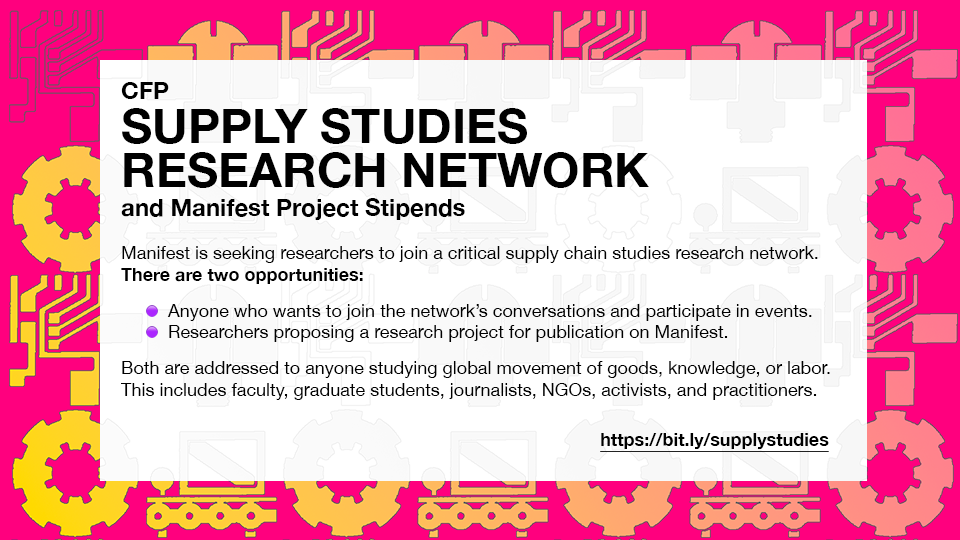
<style>
.page{position:relative;width:960px;height:540px;background:#ffffff}
.page>*{position:absolute;margin:0}
.t1{font:48px/44px "HelveticaNeue-Bold";color:#000000}
.t2{font:24px/44px "HelveticaNeue-Bold";color:#000000}
.t3{font:24px "HelveticaNeue-Bold";color:#000000}
.t4{font:18px "HelveticaNeue";color:#000000}
.t5{font:18px "HelveticaNeue-Bold";color:#000000}
.t6{font:12px "AppleColorEmoji";color:#000000}
.t7{font:18px "HelveticaNeue-Bold";color:#000000;text-decoration:underline}
</style>
<div class="page">
<p class="t1" style="left:121px;top:82px;width:528px;height:138px"><span class="t2">CFP<br></span>SUPPLY STUDIES <br>RESEARCH NETWORK<br><span class="t3">and Manifest Project Stipends</span></p>
<p class="t4" style="left:121px;top:246px;width:709px;height:154px">Manifest is seeking researchers to join a critical supply chain studies research network. <br><span class="t5">There are two opportunities: <br><br>     </span><span class="t6">🟣</span>  Anyone who wants to join the network’s conversations and participate in events.<br>     <span class="t6">🟣</span>  Researchers proposing a research project for publication on Manifest. <br><br>Both are addressed to anyone studying global movement of goods, knowledge, or labor. <br>This includes faculty, graduate students, journalists, NGOs, activists, and practitioners.</p>
<p class="t7" style="left:600px;top:433px;width:229px;height:19px">https://bit.ly/supplystudies</p>
</div>
